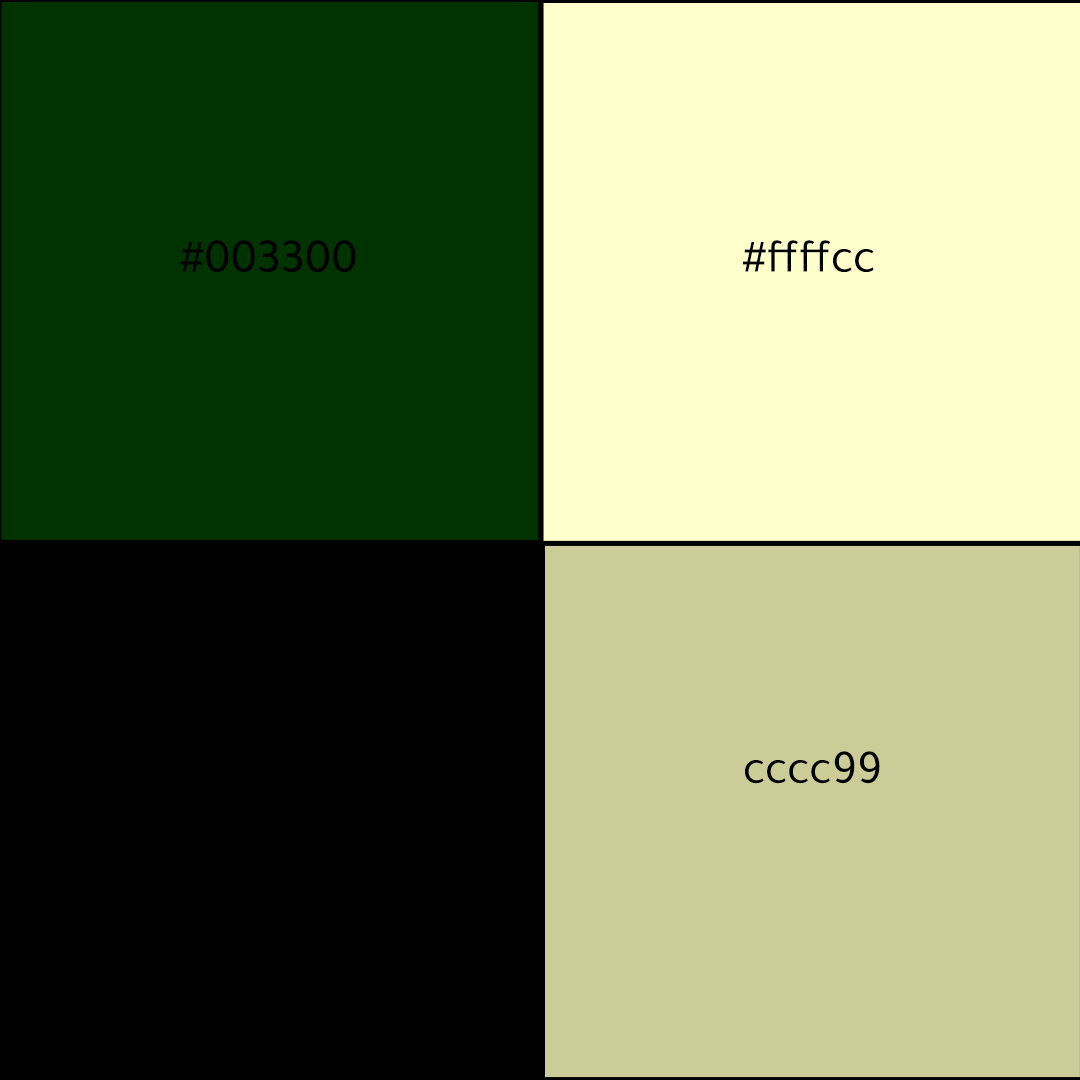
<style>
.page{position:relative;width:1080px;height:1080px;background:#000000}
.page>*{position:absolute;margin:0}
.t1{font:48px "Tajawal-Regular";color:#000000}
</style>
<div class="page">
<p class="t1" style="left:180px;top:240px;width:176px;height:32px">#003300</p>
<p class="t1" style="left:743px;top:240px;width:131px;height:32px">ffffcc#</p>
<p class="t1" style="left:745px;top:751px;width:135px;height:33px">cccc99</p>
</div>
